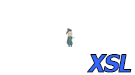
<style>
.page{position:relative;width:135px;height:75px;background:#ffffff}
.page>*{position:absolute;margin:0}
.t1{font:24px "Tahoma-Bold";letter-spacing:-0.065em;font-weight:bold;font-style:italic}
</style>
<div class="page">
<p class="t1" style="left:87px;top:54px;width:45px;height:19px">XSL</p>
</div>
